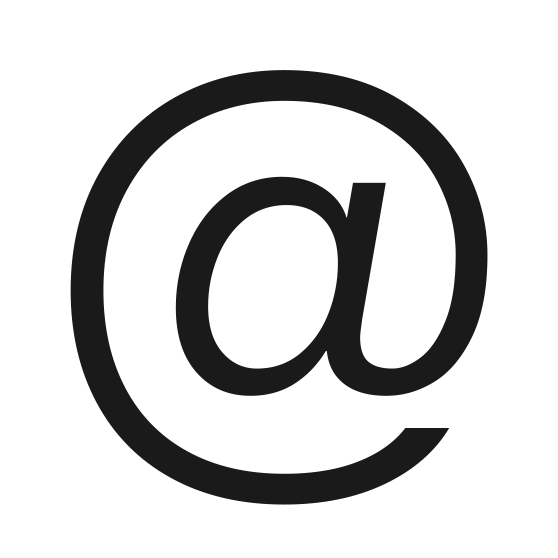
<style>
.page{position:relative;width:558px;height:558px;background:#ffffff}
.page>*{position:absolute;margin:0}
.t1{font:503.4px "NunitoSans-Regular";color:#1a1a1a}
</style>
<div class="page">
<p class="t1" style="left:70px;top:70px;width:418px;height:435px">@</p>
</div>
